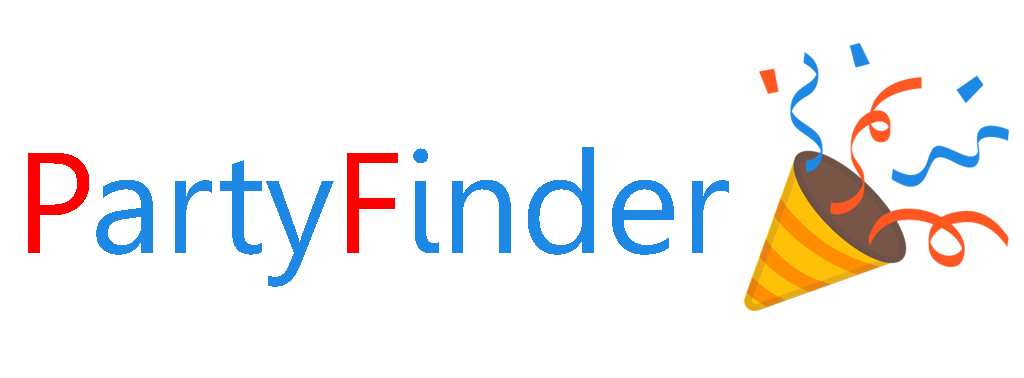
<style>
.page{position:relative;width:1024px;height:378px;background:#ffffff}
.page>*{position:absolute;margin:0}
.t1{font:143px "Leelawadee";color:#1e88e5}
.t2{font:143px "Leelawadee";color:#ff0000}
</style>
<div class="page">
<p class="t1" style="left:28px;top:147px;width:701px;height:140px"><span class="t2">P</span>arty<span class="t2">F</span>inder</p>
</div>
